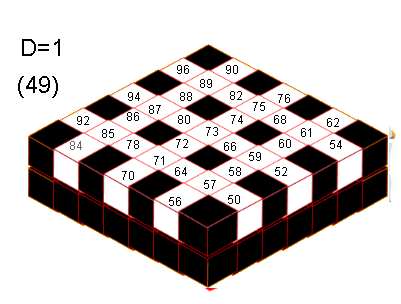
<style>
.page{position:relative;width:401px;height:304px;background:#ffffff}
.page>*{position:absolute;margin:0}
.t1{font:23.9px "ArialMT";color:#000000}
.t2{font:12px "ArialMT";color:#000000}
.t3{font:12px "ArialMT";color:#666666}
</style>
<div class="page">
<p class="t1" style="left:22px;top:39px;width:38px;height:17px">D=1</p>
<p class="t2" style="left:177px;top:65px;width:12px;height:9px">96</p>
<p class="t2" style="left:226px;top:65px;width:12px;height:9px">90</p>
<p class="t1" style="left:18px;top:76px;width:40px;height:22px">(49)</p>
<p class="t2" style="left:200px;top:79px;width:12px;height:9px">89</p>
<p class="t2" style="left:128px;top:92px;width:12px;height:9px">94</p>
<p class="t2" style="left:180px;top:92px;width:12px;height:9px">88</p>
<p class="t2" style="left:230px;top:91px;width:12px;height:9px">82</p>
<p class="t2" style="left:253px;top:102px;width:12px;height:9px">75</p>
<p class="t2" style="left:278px;top:94px;width:12px;height:9px">76</p>
<p class="t2" style="left:127px;top:112px;width:12px;height:9px">86</p>
<p class="t2" style="left:149px;top:105px;width:12px;height:9px">87</p>
<p class="t2" style="left:77px;top:116px;width:12px;height:9px">92</p>
<p class="t2" style="left:178px;top:115px;width:12px;height:9px">80</p>
<p class="t2" style="left:231px;top:115px;width:12px;height:9px">74</p>
<p class="t2" style="left:274px;top:115px;width:12px;height:9px">68</p>
<p class="t2" style="left:327px;top:118px;width:12px;height:9px">62</p>
<p class="t2" style="left:102px;top:129px;width:12px;height:9px">85</p>
<p class="t2" style="left:206px;top:127px;width:12px;height:9px">73</p>
<p class="t2" style="left:301px;top:128px;width:10px;height:9px">61</p>
<p class="t3" style="left:70px;top:141px;width:12px;height:9px">84</p>
<p class="t2" style="left:127px;top:140px;width:12px;height:9px">78</p>
<p class="t2" style="left:176px;top:139px;width:12px;height:9px">72</p>
<p class="t2" style="left:224px;top:142px;width:12px;height:9px">66</p>
<p class="t2" style="left:279px;top:139px;width:12px;height:9px">60</p>
<p class="t2" style="left:330px;top:140px;width:12px;height:9px">54</p>
<p class="t2" style="left:154px;top:156px;width:10px;height:9px">71</p>
<p class="t2" style="left:249px;top:152px;width:12px;height:9px">59</p>
<p class="t2" style="left:122px;top:171px;width:12px;height:9px">70</p>
<p class="t2" style="left:175px;top:167px;width:12px;height:9px">64</p>
<p class="t2" style="left:229px;top:167px;width:12px;height:9px">58</p>
<p class="t2" style="left:275px;top:167px;width:12px;height:9px">52</p>
<p class="t2" style="left:204px;top:180px;width:12px;height:9px">57</p>
<p class="t2" style="left:169px;top:197px;width:12px;height:9px">56</p>
<p class="t2" style="left:228px;top:195px;width:12px;height:9px">50</p>
</div>
